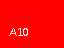
<style>
.page{position:relative;width:64px;height:48px;background:#ff0000}
.page>*{position:absolute;margin:0}
.t1{font:11px "MicrosoftYaHei";color:#fcfcfc}
</style>
<div class="page">
<p class="t1" style="left:9px;top:28px;width:19px;height:8px">A10</p>
</div>
